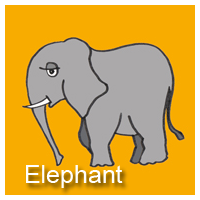
<style>
.page{position:relative;width:200px;height:200px;background:#f8ac00}
.page>*{position:absolute;margin:0}
.t1{font:25px "ArialMT";color:#ffffff}
</style>
<div class="page">
<p class="t1" style="left:26px;top:165px;width:97px;height:23px">Elephant</p>
</div>
